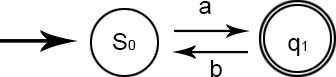
<style>
.page{position:relative;width:336px;height:77px;background:#ffffff}
.page>*{position:absolute;margin:0}
.t1{font:24px "ArialMT";color:#000000}
.t2{font:14px "ArialMT";color:#000000}
</style>
<div class="page">
<p class="t1" style="left:199px;top:1px;width:12px;height:13px">a</p>
<p class="t1" style="left:113px;top:33px;width:23px;height:17px">S<span class="t2">0</span></p>
<p class="t1" style="left:288px;top:38px;width:19px;height:18px">q<span class="t2">1</span></p>
<p class="t1" style="left:210px;top:60px;width:12px;height:17px">b</p>
</div>
